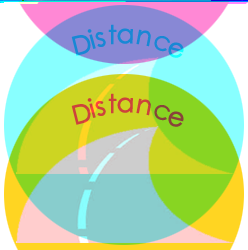
<style>
.page{position:relative;width:248px;height:250px}
.page>*{position:absolute;margin:0}
.t1{font:26px "CenturyGothic";font-weight:bold}
</style>
<div class="page">
<p class="t1" style="left:71px;top:22px;width:113px;height:34px">Distance</p>
</div>
